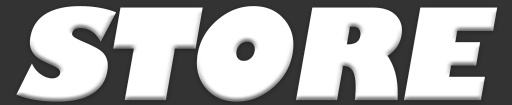
<style>
.page{position:relative;width:512px;height:105px;background:#ffffff}
.page>*{position:absolute;margin:0}
.t1{font:124.4px "GillSans-UltraBold";letter-spacing:-0.025em;color:#ffffff;font-style:italic}
</style>
<div class="page">
<p class="t1" style="left:16px;top:6px;width:482px;height:96px">STORE</p>
</div>
